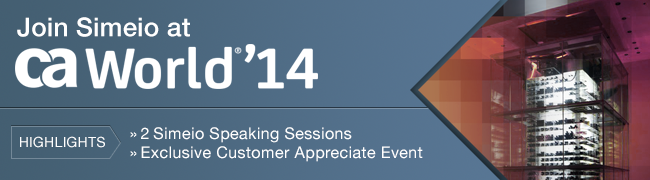
<style>
.page{position:relative;width:650px;height:180px}
.page>*{position:absolute;margin:0}
.t1{font:26px "HelveticaNeue-Medium";letter-spacing:0.01em;color:#ffffff}
.t2{font:14px "HelveticaNeue";letter-spacing:0.025em;color:#ffffff;text-transform:uppercase}
.t3{font:16px "HelveticaNeue";letter-spacing:0.025em;color:#ffffff}
.t4{font:16px "HelveticaNeue";color:#ffffff}
</style>
<div class="page">
<p class="t1" style="left:17px;top:17px;width:173px;height:20px">Join Simeio at</p>
<p class="t2" style="left:20px;top:136px;width:85px;height:12px">Highlights</p>
<p class="t3" style="left:130px;top:127px;width:222px;height:16px"><span class="t4">» </span>2 Simeio Speaking Sessions</p>
<p class="t3" style="left:130px;top:146px;width:293px;height:16px"><span class="t4">» </span>Exclusive Customer Appreciate Event</p>
</div>
